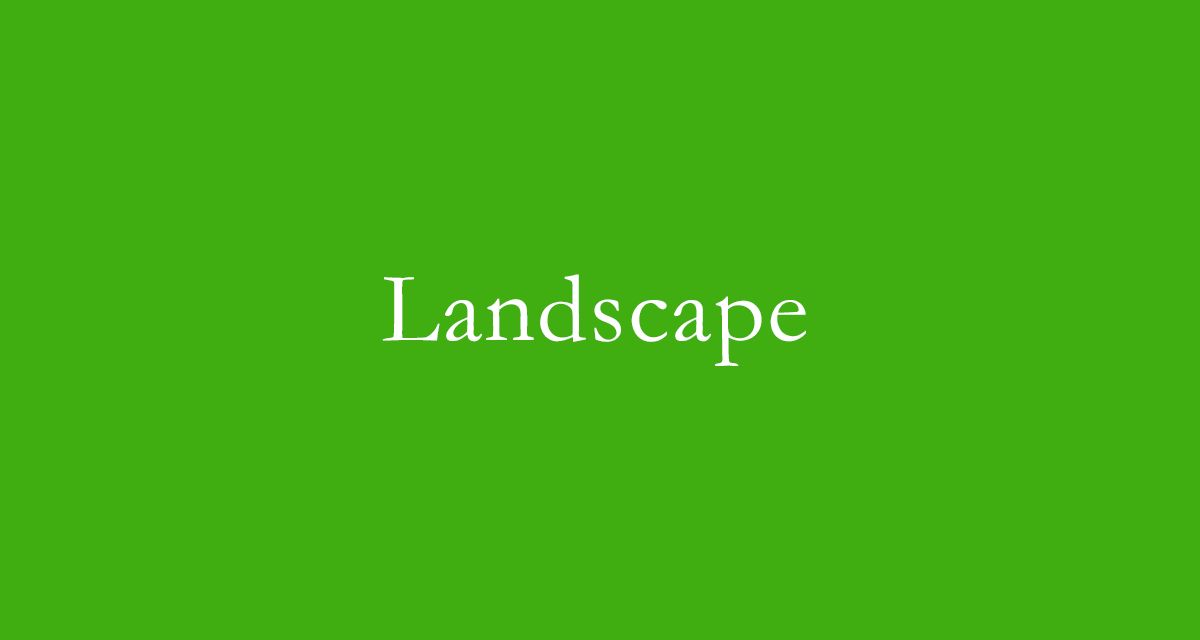
<style>
.page{position:relative;width:1200px;height:640px;background:#40ae10}
.page>*{position:absolute;margin:0}
.t1{font:100px "Garamond";letter-spacing:0.02em;color:#ffffff}
</style>
<div class="page">
<p class="t1" style="left:382px;top:274px;width:424px;height:92px">Landscape</p>
</div>
